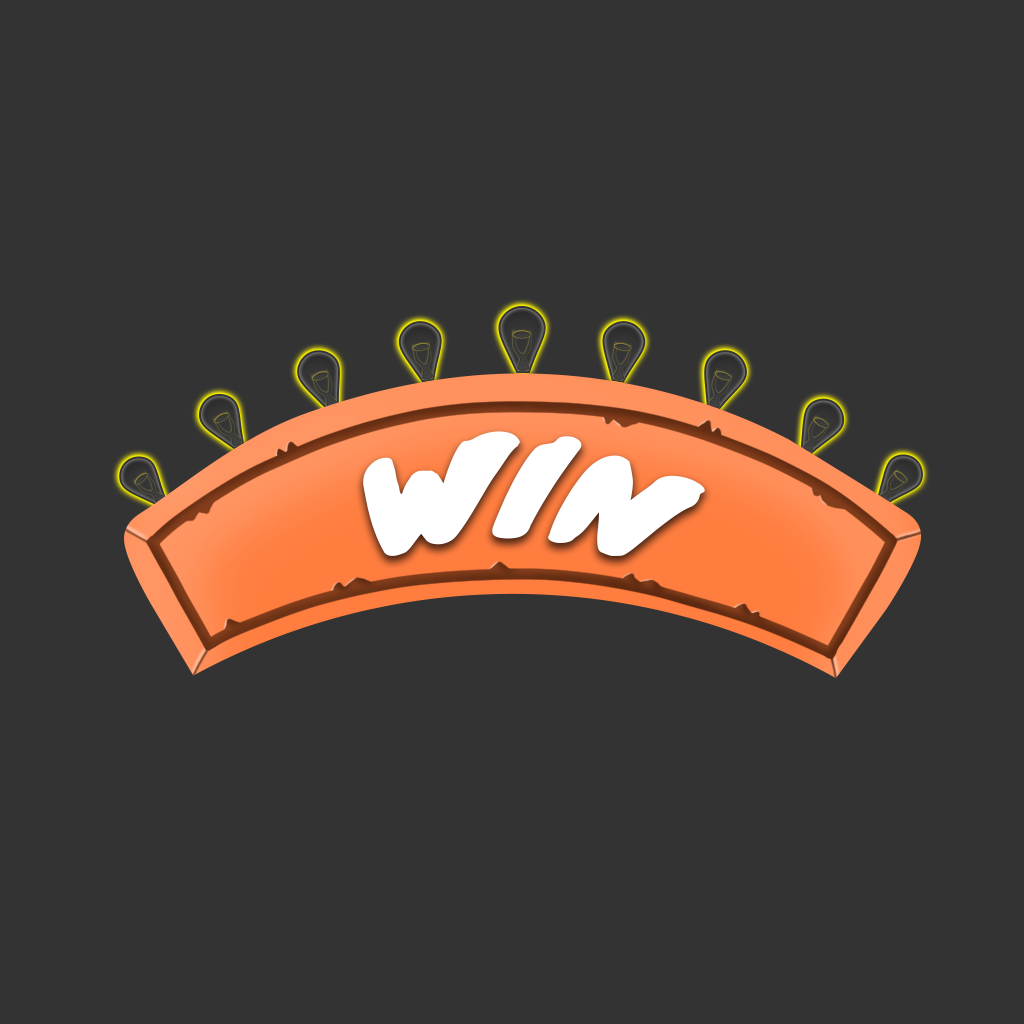
<style>
.page{position:relative;width:1024px;height:1024px;background:#333333}
.page>*{position:absolute;margin:0}
.t1{font:127.5px "Knewave-Regular";color:#ffffff}
</style>
<div class="page">
<p class="t1" style="left:363px;top:431px;width:342px;height:125px;rotate:3deg">WIN</p>
</div>
